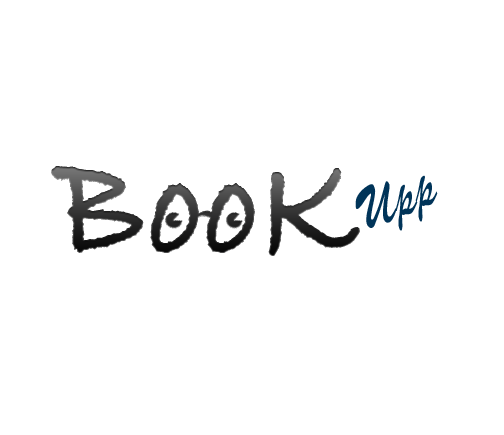
<style>
.page{position:relative;width:504px;height:435px;background:#ffffff}
.page>*{position:absolute;margin:0}
.t1{font:151.4px "BradleyHandITCTT-Bold";letter-spacing:0.005em;color:#00171f;scale:0.86 1}
.t2{font:63.4px "BrushScriptMT";letter-spacing:0.005em;color:#003459;scale:0.86 1}
</style>
<div class="page">
<p class="t1" style="left:51px;top:166px;width:309px;height:90px">BooK</p>
<p class="t2" style="left:355px;top:175px;width:83px;height:56px;rotate:-22deg">Upp</p>
</div>
